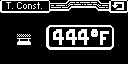
<style>
.page{position:relative;width:128px;height:64px;background:#000000}
.page>*{position:absolute;margin:0}
.t1{font:16px "HaxrCorp-4089";color:#ffffff}
.t2{font:25px "Born2bSportyV2";color:#ffffff}
</style>
<div class="page">
<p class="t1" style="left:6px;top:2px;width:36px;height:7px">T. Const.</p>
<p class="t2" style="left:53px;top:29px;width:56px;height:16px">444°F</p>
</div>
